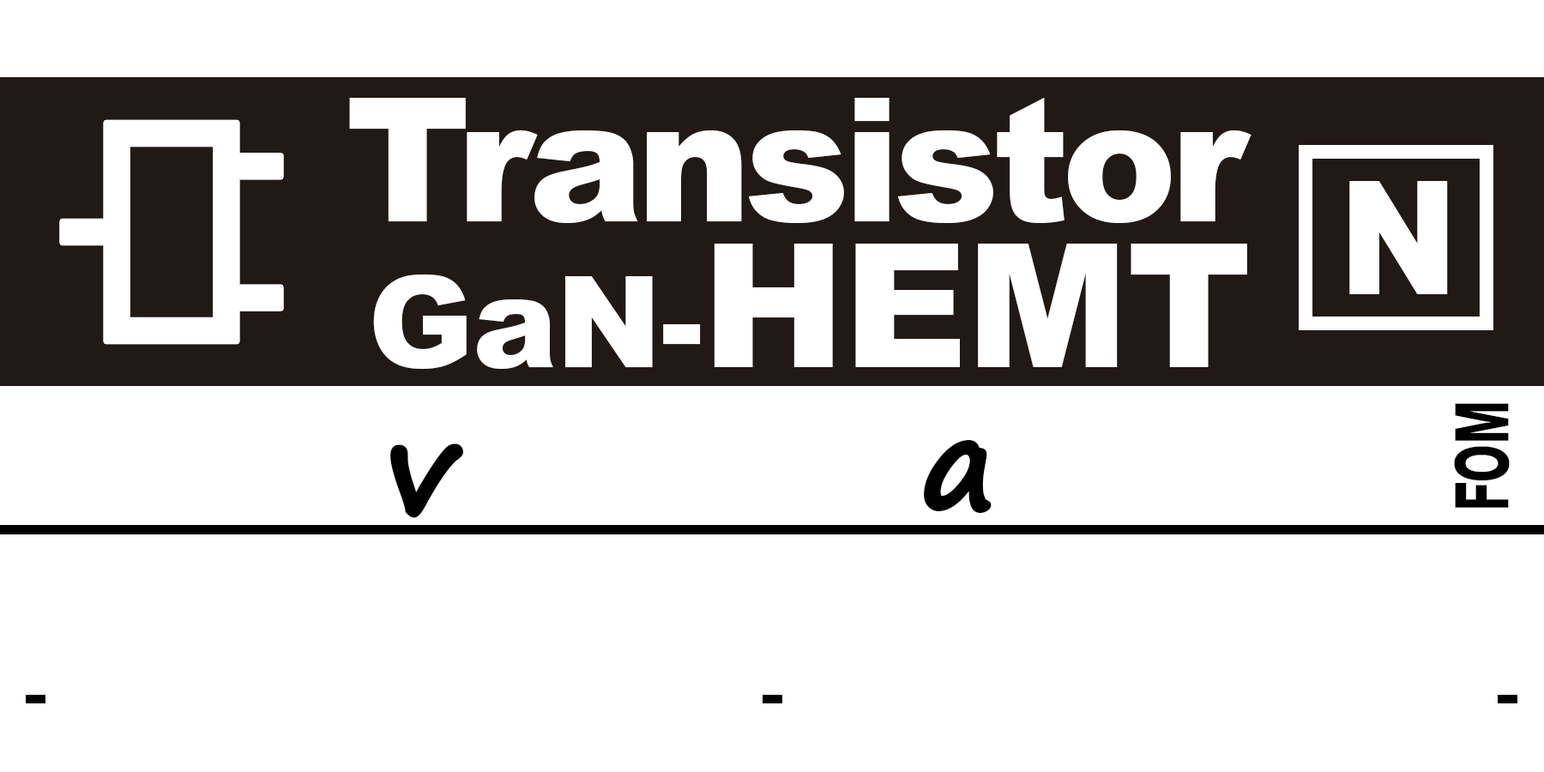
<style>
.page{position:relative;width:1544px;height:772px;background:#ffffff}
.page>*{position:absolute;margin:0}
.t1{font:172.5px/145.3px "Arial-Black";letter-spacing:-0.04em;color:#ffffff}
.t2{font:127.1px/145.3px "Arial-Black";letter-spacing:-0.01em;color:#ffffff}
.t3{font:172.5px/145.3px "Arial-Black";letter-spacing:-0.01em;color:#ffffff}
.t4{font:157.9px "Arial-Black";letter-spacing:-0.01em;color:#ffffff;scale:0.9 1}
.t5{font:95.7px "Arial-BoldMT";letter-spacing:-0.025em;color:#010101;font-variant:small-caps;scale:0.62 1}
.t6{font:127.1px "SegoePrint-Bold";letter-spacing:-0.01em;color:#010101;font-weight:bold}
.t7{font:127.1px "Arial-BoldMT";letter-spacing:-0.01em;color:#010101}
</style>
<div class="page">
<p class="t1" style="left:349px;top:98px;width:903px;height:271px;text-align:right">Transistor<br><span class="t2">GaN-</span><span class="t3">HEMT</span></p>
<p class="t4" style="left:1350px;top:181px;width:98px;height:113px">N</p>
<p class="t5" style="left:1454px;top:403px;width:56px;height:105px;rotate:-90deg">fom</p>
<p class="t6" style="left:390px;top:444px;width:74px;height:74px">v</p>
<p class="t6" style="left:924px;top:439px;width:68px;height:75px"><span class="t7">   </span>a</p>
</div>
